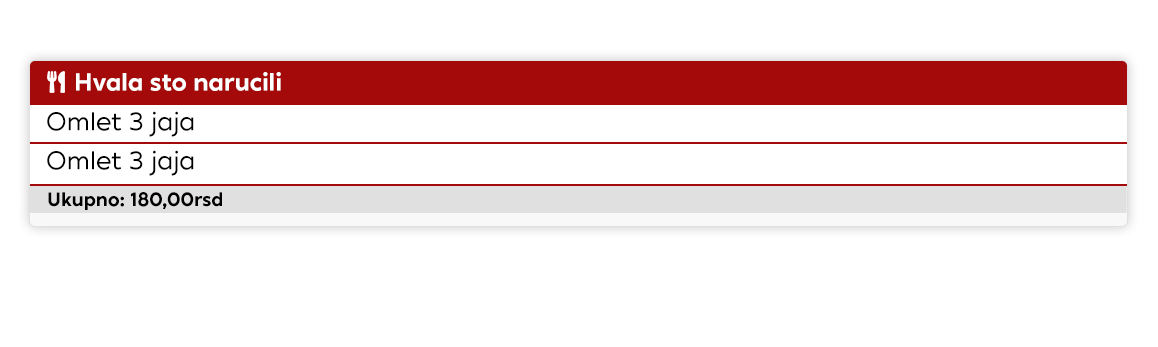
<style>
.page{position:relative;width:1158px;height:347px;background:#ffffff}
.page>*{position:absolute;margin:0}
.t1{font:24.6px "XXIIGeom-Bold";color:#ffffff}
.t2{font:25.6px "XXIIGeom-Regular";color:#000000}
.t3{font:19.3px "XXIIGeom-Bold";color:#000000}
</style>
<div class="page">
<p class="t1" style="left:76px;top:72px;width:205px;height:19px">Hvala sto narucili</p>
<p class="t2" style="left:47px;top:111px;width:147px;height:26px">Omlet 3 jaja</p>
<p class="t2" style="left:47px;top:150px;width:147px;height:26px">Omlet 3 jaja</p>
<p class="t3" style="left:48px;top:192px;width:174px;height:18px">Ukupno: 180,00rsd</p>
</div>
